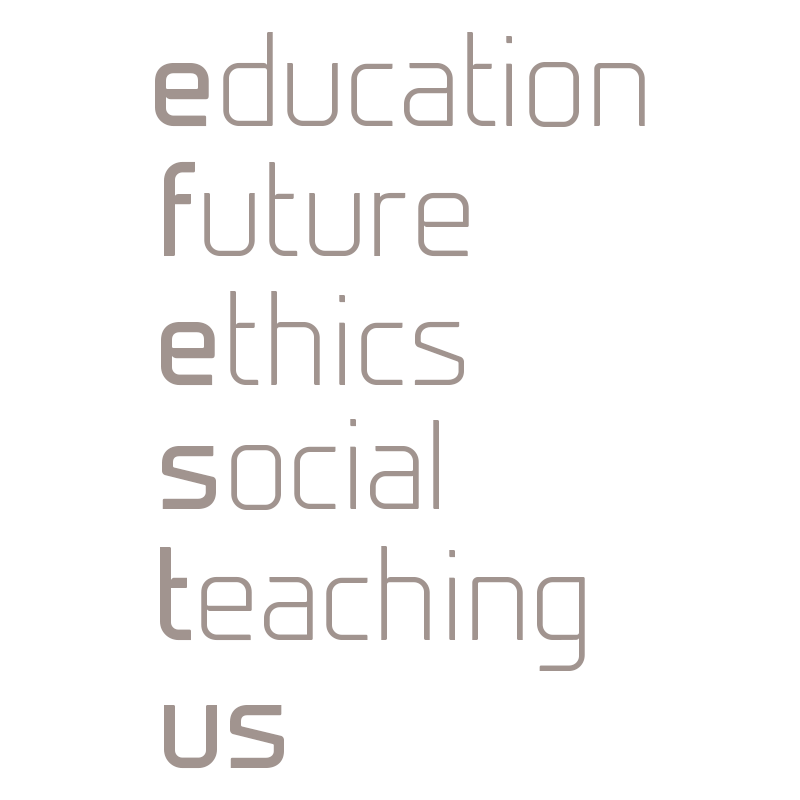
<style>
.page{position:relative;width:800px;height:800px;background:#ffffff}
.page>*{position:absolute;margin:0}
.t1{font:125px "Prime-Light";color:#a1948f}
.t2{font:125px "Prime-Regular";color:#a1948f}
</style>
<div class="page">
<p class="t1" style="left:155px;top:32px;width:490px;height:95px"><span class="t2">e</span>ducation</p>
<p class="t1" style="left:164px;top:161px;width:305px;height:96px"><span class="t2">f</span>uture</p>
<p class="t1" style="left:161px;top:291px;width:303px;height:95px"><span class="t2">e</span>thics</p>
<p class="t1" style="left:162px;top:419px;width:277px;height:91px"><span class="t2">s</span>ocial</p>
<p class="t1" style="left:160px;top:546px;width:425px;height:125px"><span class="t2">t</span>eaching</p>
<p class="t2" style="left:164px;top:705px;width:120px;height:64px">us</p>
</div>
